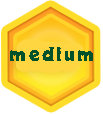
<style>
.page{position:relative;width:103px;height:114px;background:#ffffff}
.page>*{position:absolute;margin:0}
.t1{font:18px "Skranji-Bold";letter-spacing:0.15em;color:#01512b}
</style>
<div class="page">
<p class="t1" style="left:10px;top:47px;width:83px;height:14px">medium</p>
</div>
